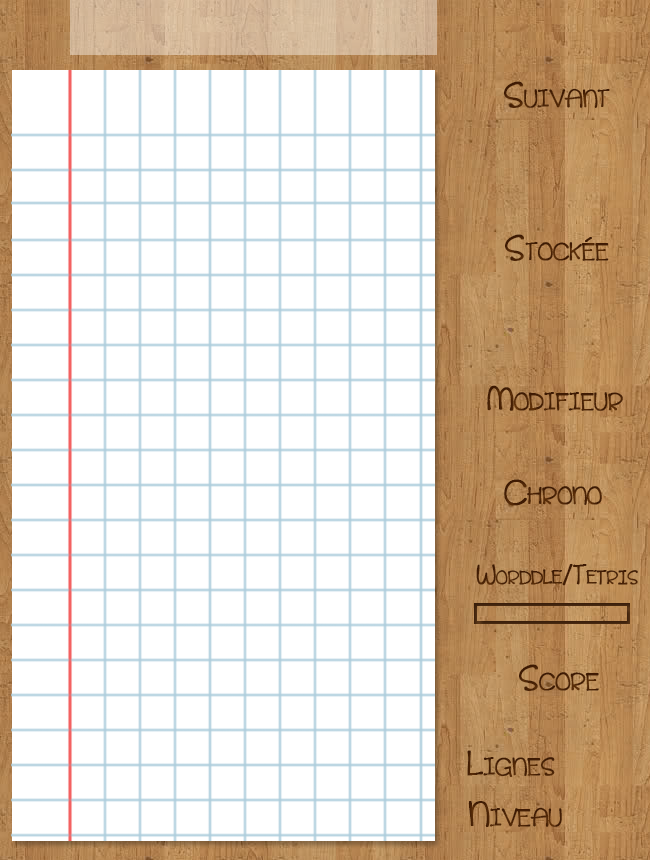
<style>
.page{position:relative;width:650px;height:860px;background:#ffffff}
.page>*{position:absolute;margin:0}
.t1{font:36px "cinnamoncake";color:#482105;font-variant:small-caps;font-weight:bold}
.t2{font:36px "cinnamoncake";color:#472005;font-variant:small-caps;font-weight:bold}
.t3{font:28px "cinnamoncake";color:#462005;font-variant:small-caps;font-weight:bold}
.t4{font:36px "cinnamoncake";color:#492205;font-variant:small-caps;font-weight:bold}
</style>
<div class="page">
<p class="t1" style="left:504px;top:81px;width:106px;height:27px">Suivant</p>
<p class="t2" style="left:505px;top:234px;width:104px;height:27px">Stockée</p>
<p class="t1" style="left:487px;top:385px;width:136px;height:26px">Modifieur</p>
<p class="t1" style="left:504px;top:479px;width:98px;height:27px">Chrono</p>
<p class="t3" style="left:476px;top:563px;width:162px;height:23px">Worddle/Tetris</p>
<p class="t2" style="left:519px;top:664px;width:80px;height:27px">Score</p>
<p class="t1" style="left:467px;top:750px;width:88px;height:27px">Lignes</p>
<p class="t4" style="left:468px;top:801px;width:94px;height:26px">Niveau</p>
</div>
